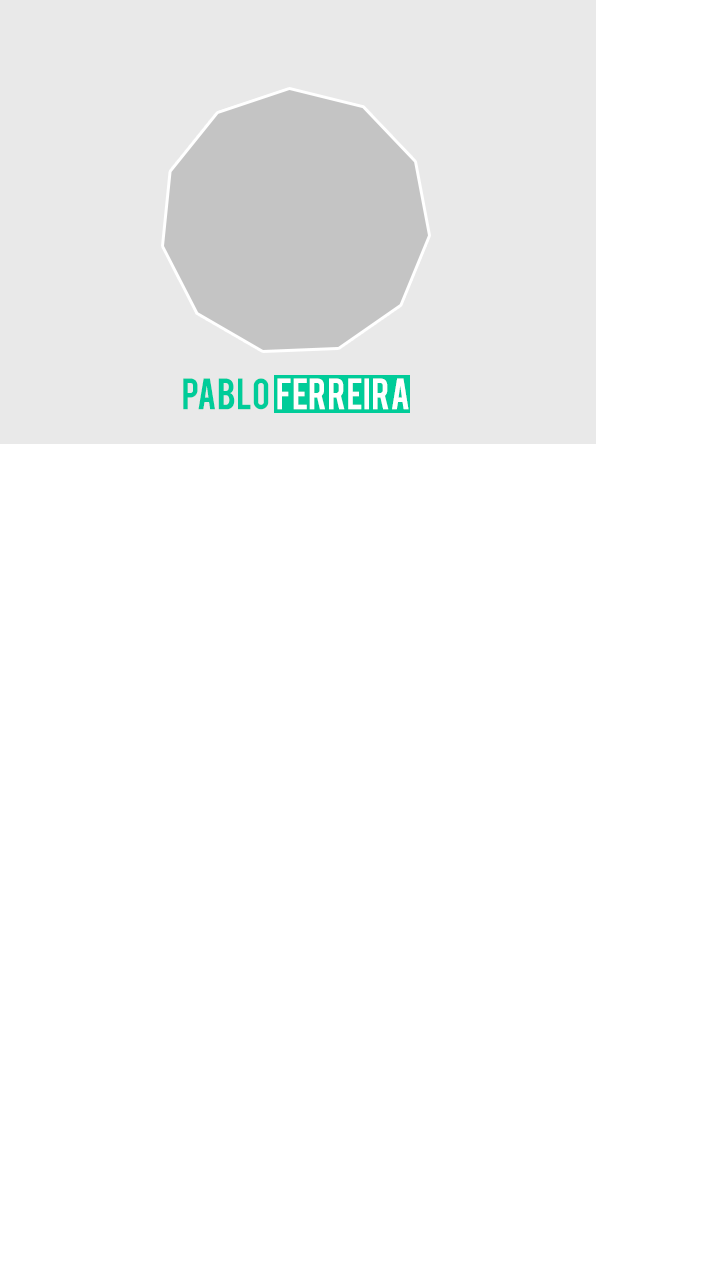
<style>
.page{position:relative;width:720px;height:1280px;background:#ffffff}
.page>*{position:absolute;margin:0}
.t1{font:34px "Bebas";color:#ffffff}
.t2{font:34px "Bebas";color:#00cc99}
</style>
<div class="page">
<p class="t1" style="left:183px;top:378px;width:226px;height:32px"><span class="t2">PABLO  </span>FERREIRA</p>
</div>
